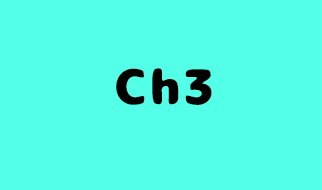
<style>
.page{position:relative;width:322px;height:190px;background:#53ffe7}
.page>*{position:absolute;margin:0}
.t1{font:50px "07NikumaruFont";letter-spacing:0.08em;color:#000000}
</style>
<div class="page">
<p class="t1" style="left:116px;top:68px;width:96px;height:37px">Ch3</p>
</div>
